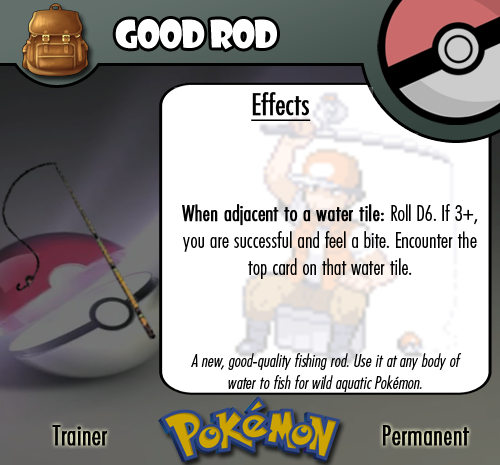
<style>
.page{position:relative;width:500px;height:465px;background:#ffffff}
.page>*{position:absolute;margin:0}
.t1{font:36.7px "ShowcardGothic-Reg";letter-spacing:-0.025em;color:#ffffff;scale:0.91 1}
.t2{font:22.2px "FuturaCondensedBQ-Light";color:#010101}
.t3{font:27.8px "FuturaCondensedBQ-Light";color:#010101;font-weight:bold}
.t4{font:30.6px "FuturaCondensedBQ-Light";color:#010101;font-weight:bold;text-decoration:underline}
.t5{font:22.2px "FuturaCondensedBQ-Light";color:#010101;font-weight:bold}
.t6{font:18.1px "FuturaCondensedBQ-Light";color:#010101;font-style:italic}
</style>
<div class="page">
<p class="t1" style="left:115px;top:19px;width:162px;height:31px">Good Rod</p>
<p class="t2" style="left:182px;top:92px;width:296px;height:187px"><span class="t3">  </span><span class="t4">Effects<br><br><br><br><br><br><br></span><span class="t5">When adjacent to a water tile: </span>Roll D6. If 3+, you are successful and feel a bite. Encounter the top card on that water tile.</p>
<p class="t6" style="left:191px;top:353px;width:271px;height:39px;text-align:center">A new, good-quality fishing rod. Use it at any body of water to fish for wild aquatic Pokémon.</p>
<p class="t3" style="left:52px;top:425px;width:55px;height:21px">Trainer</p>
<p class="t3" style="left:383px;top:425px;width:86px;height:21px">Permanent</p>
</div>
